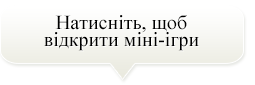
<style>
.page{position:relative;width:255px;height:85px;background:#ffffff}
.page>*{position:absolute;margin:0}
.t1{font:20px/16.7px "TimesNewRomanPSMT";color:#000000}
</style>
<div class="page">
<p class="t1" style="left:44px;top:15px;width:155px;height:36px;text-align:center">Натисніть, щоб<br>відкрити міні-ігри</p>
</div>
